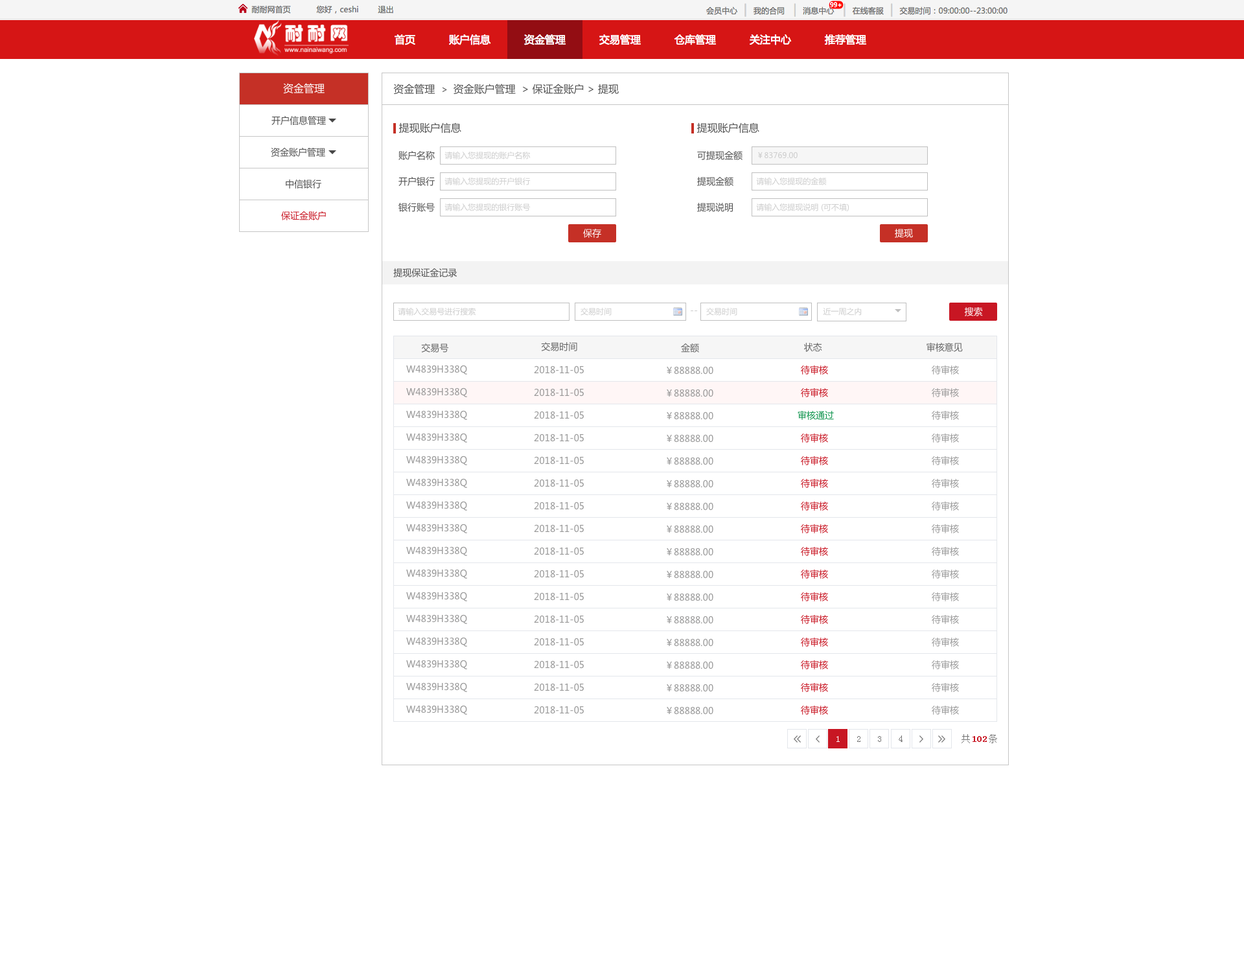
<style>
.page{position:relative;width:1244px;height:959px;background:#ffffff}
.page>*{position:absolute;margin:0}
.t1{font:10.4px "MicrosoftYaHei";color:#ffffff}
.t2{font:10.4px "MicrosoftYaHei";color:#535353}
.t3{font:9.1px "MicrosoftYaHei";color:#535353}
.t4{font:7.8px "MicrosoftYaHei";color:#cccccc}
.t5{font:9.1px "MicrosoftYaHei";color:#c81623}
.t6{font:9.1px "MicrosoftYaHei";color:#ffffff}
.t7{font:9.1px "MicrosoftYaHei";color:#cccccc}
.t8{font:9.1px "MicrosoftYaHei";color:#666666}
.t9{font:9.1px "MicrosoftYaHei";color:#999999}
.t10{font:9.1px "MicrosoftYaHei";color:#0f944d}
.t11{font:9.1px "SimSun";color:#ffffff}
.t12{font:9.1px "SimSun";color:#767676}
.t13{font:9.1px "SimSun";color:#c81623;font-weight:bold}
</style>
<div class="page">
<p class="t1" style="left:283px;top:83px;width:42px;height:11px">资金管理</p>
<p class="t2" style="left:393px;top:84px;width:226px;height:11px">资金管理  <span class="t3">&gt;  </span>资金账户管理  &gt; 保证金账户 &gt; 提现</p>
<p class="t3" style="left:271px;top:116px;width:55px;height:9px">开户信息管理</p>
<p class="t2" style="left:398px;top:122px;width:63px;height:11px">提现账户信息</p>
<p class="t2" style="left:696px;top:122px;width:63px;height:11px">提现账户信息</p>
<p class="t3" style="left:271px;top:148px;width:54px;height:9px">资金账户管理</p>
<p class="t3" style="left:398px;top:151px;width:37px;height:9px">账户名称</p>
<p class="t4" style="left:444px;top:152px;width:87px;height:7px">请输入您提现的账户名称</p>
<p class="t3" style="left:697px;top:151px;width:45px;height:9px">可提现金额</p>
<p class="t4" style="left:758px;top:152px;width:39px;height:7px">￥83769.00</p>
<p class="t3" style="left:286px;top:179px;width:35px;height:10px">中信银行</p>
<p class="t3" style="left:398px;top:177px;width:37px;height:9px">开户银行</p>
<p class="t4" style="left:444px;top:177px;width:87px;height:8px">请输入您提现的开户银行</p>
<p class="t3" style="left:697px;top:177px;width:36px;height:9px">提现金额</p>
<p class="t4" style="left:756px;top:177px;width:71px;height:8px">请输入您提现的金额</p>
<p class="t3" style="left:398px;top:203px;width:37px;height:9px">银行账号</p>
<p class="t4" style="left:444px;top:203px;width:87px;height:8px">请输入您提现的银行账号</p>
<p class="t3" style="left:697px;top:203px;width:36px;height:9px">提现说明</p>
<p class="t4" style="left:756px;top:203px;width:93px;height:9px">请输入您提现说明 (可不填)</p>
<p class="t5" style="left:281px;top:211px;width:45px;height:9px">保证金账户</p>
<p class="t6" style="left:583px;top:229px;width:18px;height:9px">保存</p>
<p class="t6" style="left:895px;top:229px;width:18px;height:9px">提现</p>
<p class="t3" style="left:393px;top:268px;width:64px;height:9px">提现保证金记录</p>
<p class="t4" style="left:398px;top:308px;width:77px;height:7px">请输入交易号进行搜索</p>
<p class="t4" style="left:580px;top:308px;width:32px;height:7px">交易时间</p>
<p class="t7" style="left:691px;top:310px;width:7px;height:2px">--</p>
<p class="t4" style="left:706px;top:308px;width:31px;height:7px">交易时间</p>
<p class="t4" style="left:823px;top:308px;width:39px;height:7px">近一周之内</p>
<p class="t6" style="left:964px;top:307px;width:19px;height:9px">搜索</p>
<p class="t8" style="left:421px;top:343px;width:28px;height:9px">交易号</p>
<p class="t8" style="left:541px;top:342px;width:36px;height:9px">交易时间</p>
<p class="t8" style="left:681px;top:343px;width:18px;height:9px">金额</p>
<p class="t8" style="left:804px;top:343px;width:18px;height:9px">状态</p>
<p class="t8" style="left:926px;top:343px;width:37px;height:9px">审核意见</p>
<p class="t9" style="left:406px;top:365px;width:61px;height:9px">W4839H338Q</p>
<p class="t9" style="left:534px;top:365px;width:50px;height:9px">2018-11-05</p>
<p class="t5" style="left:801px;top:365px;width:27px;height:9px">待审核</p>
<p class="t9" style="left:932px;top:365px;width:27px;height:9px">待审核</p>
<p class="t9" style="left:667px;top:366px;width:46px;height:8px">￥88888.00</p>
<p class="t9" style="left:406px;top:387px;width:61px;height:10px">W4839H338Q</p>
<p class="t9" style="left:534px;top:388px;width:50px;height:8px">2018-11-05</p>
<p class="t9" style="left:667px;top:389px;width:46px;height:8px">￥88888.00</p>
<p class="t5" style="left:801px;top:388px;width:27px;height:9px">待审核</p>
<p class="t9" style="left:932px;top:388px;width:27px;height:9px">待审核</p>
<p class="t9" style="left:406px;top:410px;width:61px;height:10px">W4839H338Q</p>
<p class="t9" style="left:534px;top:411px;width:50px;height:8px">2018-11-05</p>
<p class="t9" style="left:667px;top:411px;width:46px;height:9px">￥88888.00</p>
<p class="t10" style="left:797px;top:411px;width:37px;height:9px">审核通过</p>
<p class="t9" style="left:932px;top:411px;width:27px;height:9px">待审核</p>
<p class="t9" style="left:406px;top:433px;width:61px;height:9px">W4839H338Q</p>
<p class="t9" style="left:534px;top:433px;width:50px;height:9px">2018-11-05</p>
<p class="t9" style="left:667px;top:434px;width:46px;height:8px">￥88888.00</p>
<p class="t5" style="left:801px;top:433px;width:27px;height:9px">待审核</p>
<p class="t9" style="left:932px;top:433px;width:27px;height:9px">待审核</p>
<p class="t9" style="left:406px;top:455px;width:61px;height:10px">W4839H338Q</p>
<p class="t9" style="left:534px;top:456px;width:50px;height:8px">2018-11-05</p>
<p class="t9" style="left:667px;top:457px;width:46px;height:8px">￥88888.00</p>
<p class="t5" style="left:801px;top:456px;width:27px;height:9px">待审核</p>
<p class="t9" style="left:932px;top:456px;width:27px;height:9px">待审核</p>
<p class="t9" style="left:406px;top:478px;width:61px;height:10px">W4839H338Q</p>
<p class="t9" style="left:534px;top:479px;width:50px;height:8px">2018-11-05</p>
<p class="t9" style="left:667px;top:479px;width:46px;height:9px">￥88888.00</p>
<p class="t5" style="left:801px;top:479px;width:27px;height:9px">待审核</p>
<p class="t9" style="left:932px;top:479px;width:27px;height:9px">待审核</p>
<p class="t9" style="left:406px;top:501px;width:61px;height:9px">W4839H338Q</p>
<p class="t9" style="left:534px;top:501px;width:50px;height:9px">2018-11-05</p>
<p class="t9" style="left:667px;top:502px;width:46px;height:8px">￥88888.00</p>
<p class="t5" style="left:801px;top:501px;width:27px;height:9px">待审核</p>
<p class="t9" style="left:932px;top:501px;width:27px;height:9px">待审核</p>
<p class="t9" style="left:406px;top:523px;width:61px;height:10px">W4839H338Q</p>
<p class="t9" style="left:534px;top:524px;width:50px;height:8px">2018-11-05</p>
<p class="t9" style="left:667px;top:525px;width:46px;height:8px">￥88888.00</p>
<p class="t5" style="left:801px;top:524px;width:27px;height:9px">待审核</p>
<p class="t9" style="left:932px;top:524px;width:27px;height:9px">待审核</p>
<p class="t9" style="left:406px;top:546px;width:61px;height:10px">W4839H338Q</p>
<p class="t9" style="left:534px;top:547px;width:50px;height:8px">2018-11-05</p>
<p class="t9" style="left:667px;top:547px;width:46px;height:9px">￥88888.00</p>
<p class="t5" style="left:801px;top:547px;width:27px;height:9px">待审核</p>
<p class="t9" style="left:932px;top:547px;width:27px;height:9px">待审核</p>
<p class="t9" style="left:406px;top:569px;width:61px;height:9px">W4839H338Q</p>
<p class="t9" style="left:534px;top:569px;width:50px;height:9px">2018-11-05</p>
<p class="t5" style="left:801px;top:569px;width:27px;height:9px">待审核</p>
<p class="t9" style="left:932px;top:569px;width:27px;height:9px">待审核</p>
<p class="t9" style="left:667px;top:570px;width:46px;height:8px">￥88888.00</p>
<p class="t9" style="left:406px;top:591px;width:61px;height:10px">W4839H338Q</p>
<p class="t9" style="left:534px;top:592px;width:50px;height:9px">2018-11-05</p>
<p class="t9" style="left:667px;top:593px;width:46px;height:8px">￥88888.00</p>
<p class="t5" style="left:801px;top:592px;width:27px;height:9px">待审核</p>
<p class="t9" style="left:932px;top:592px;width:27px;height:9px">待审核</p>
<p class="t9" style="left:406px;top:614px;width:61px;height:10px">W4839H338Q</p>
<p class="t9" style="left:534px;top:615px;width:50px;height:8px">2018-11-05</p>
<p class="t9" style="left:667px;top:615px;width:46px;height:9px">￥88888.00</p>
<p class="t5" style="left:801px;top:615px;width:27px;height:9px">待审核</p>
<p class="t9" style="left:932px;top:615px;width:27px;height:9px">待审核</p>
<p class="t9" style="left:406px;top:637px;width:61px;height:9px">W4839H338Q</p>
<p class="t9" style="left:534px;top:637px;width:50px;height:9px">2018-11-05</p>
<p class="t9" style="left:667px;top:638px;width:46px;height:8px">￥88888.00</p>
<p class="t5" style="left:801px;top:637px;width:27px;height:9px">待审核</p>
<p class="t9" style="left:932px;top:637px;width:27px;height:9px">待审核</p>
<p class="t9" style="left:406px;top:659px;width:61px;height:10px">W4839H338Q</p>
<p class="t9" style="left:534px;top:660px;width:50px;height:9px">2018-11-05</p>
<p class="t9" style="left:667px;top:661px;width:46px;height:8px">￥88888.00</p>
<p class="t5" style="left:801px;top:660px;width:27px;height:9px">待审核</p>
<p class="t9" style="left:932px;top:660px;width:27px;height:9px">待审核</p>
<p class="t9" style="left:406px;top:682px;width:61px;height:10px">W4839H338Q</p>
<p class="t9" style="left:534px;top:683px;width:50px;height:8px">2018-11-05</p>
<p class="t9" style="left:667px;top:683px;width:46px;height:9px">￥88888.00</p>
<p class="t5" style="left:801px;top:683px;width:27px;height:9px">待审核</p>
<p class="t9" style="left:932px;top:683px;width:27px;height:9px">待审核</p>
<p class="t9" style="left:406px;top:705px;width:61px;height:10px">W4839H338Q</p>
<p class="t9" style="left:534px;top:705px;width:50px;height:9px">2018-11-05</p>
<p class="t9" style="left:667px;top:706px;width:46px;height:9px">￥88888.00</p>
<p class="t5" style="left:801px;top:705px;width:27px;height:10px">待审核</p>
<p class="t9" style="left:932px;top:705px;width:27px;height:10px">待审核</p>
<p class="t11" style="left:836px;top:736px;width:4px;height:6px">1</p>
<p class="t12" style="left:857px;top:736px;width:3px;height:6px">2</p>
<p class="t12" style="left:878px;top:736px;width:3px;height:6px">3</p>
<p class="t12" style="left:898px;top:735px;width:4px;height:7px">4</p>
<p class="t12" style="left:961px;top:734px;width:36px;height:9px">共    条</p>
<p class="t13" style="left:972px;top:736px;width:15px;height:6px">102</p>
</div>
